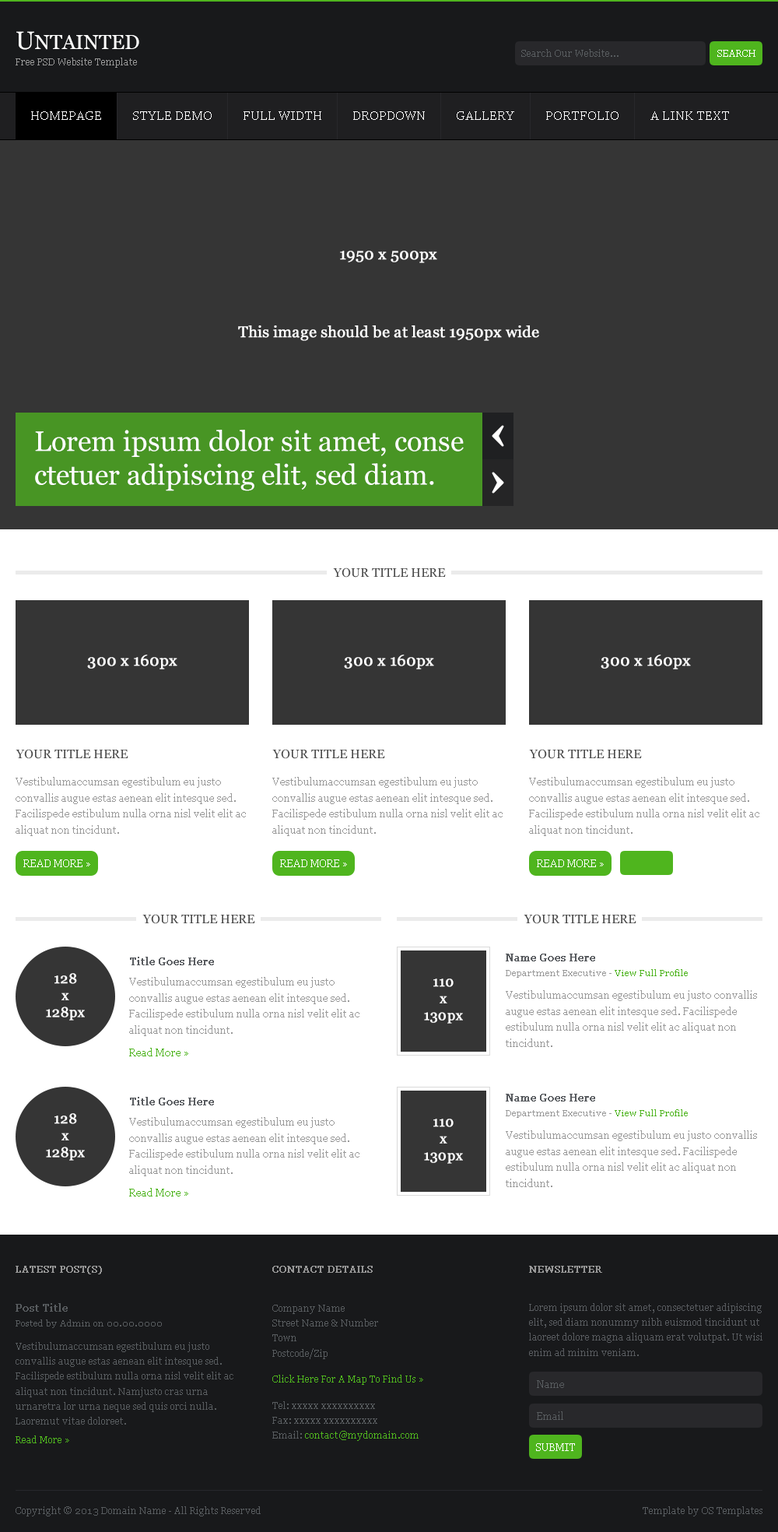
<style>
.page{position:relative;width:778px;height:1532px;background:#ffffff}
.page>*{position:absolute;margin:0}
.t1{font:20.2px "Georgia";color:#ffffff}
.t2{font:24.9px "Georgia";color:#ffffff}
.t3{font:9.3px "Georgia";color:#585c5f}
.t4{font:9.3px "Georgia";color:#ffffff}
.t5{font:9.3px "Georgia";color:#999999}
.t6{font:12.5px "Georgia";color:#ffffff}
.t7{font:15.6px "Georgia";color:#ffffff;font-weight:bold}
.t8{font:28px/33.6px "Georgia";color:#ffffff}
.t9{font:12.5px "Georgia";color:#4a4a4a}
.t10{font:10.1px/16.2px "Georgia";color:#999999}
.t11{font:10.1px "Georgia";color:#ffffff}
.t12{font:10.1px "Georgia";color:#585b5f;font-weight:bold}
.t13{font:14px/16.8px "Georgia";color:#ffffff;font-weight:bold}
.t14{font:8.6px "Georgia";color:#999999}
.t15{font:8.6px "Georgia";color:#4eb41e}
.t16{font:10.1px "Georgia";color:#4eb41e}
.t17{font:9.3px "Georgia";color:#979797;font-weight:bold}
.t18{font:10.1px "Georgia";color:#585c5f;font-weight:bold}
.t19{font:9.3px/14.9px "Georgia";color:#585c5f}
.t20{font:9.3px/11.2px "Georgia";color:#4fb51e}
.t21{font:9.3px/14.9px "Georgia";color:#4fb51e}
.t22{font:9.3px/14.9px "Georgia";color:#585b5f}
.t23{font:8.6px "Georgia";color:#585c5f}
.t24{font:10.1px "Georgia";color:#585c5f}
.t25{font:9.3px "Georgia";color:#4fb51e}
</style>
<div class="page">
<p class="t1" style="left:16px;top:31px;width:123px;height:19px"><span class="t2">U</span>NTAINTED</p>
<p class="t3" style="left:522px;top:49px;width:97px;height:8px">Search Our Website...</p>
<p class="t4" style="left:718px;top:50px;width:38px;height:7px">SEARCH</p>
<p class="t5" style="left:16px;top:58px;width:121px;height:10px">Free PSD Website Template</p>
<p class="t6" style="left:31px;top:111px;width:70px;height:9px">HOMEPAGE</p>
<p class="t6" style="left:133px;top:111px;width:79px;height:9px">STYLE DEMO</p>
<p class="t6" style="left:244px;top:111px;width:77px;height:9px">FULL WIDTH</p>
<p class="t6" style="left:353px;top:111px;width:72px;height:9px">DROPDOWN</p>
<p class="t6" style="left:457px;top:111px;width:58px;height:9px">GALLERY</p>
<p class="t6" style="left:546px;top:111px;width:73px;height:9px">PORTFOLIO</p>
<p class="t6" style="left:651px;top:111px;width:78px;height:9px">A LINK TEXT</p>
<p class="t7" style="left:340px;top:251px;width:97px;height:12px">1950 x 500px</p>
<p class="t7" style="left:238px;top:325px;width:301px;height:16px">This image should be at least 1950px wide</p>
<p class="t8" style="left:35px;top:430px;width:429px;height:61px">Lorem ipsum dolor sit amet, conse ctetuer adipiscing elit, sed diam.</p>
<p class="t9" style="left:333px;top:567px;width:113px;height:11px">YOUR TITLE HERE</p>
<p class="t7" style="left:87px;top:655px;width:90px;height:14px">300 x 160px</p>
<p class="t7" style="left:344px;top:655px;width:90px;height:14px">300 x 160px</p>
<p class="t7" style="left:601px;top:655px;width:90px;height:14px">300 x 160px</p>
<p class="t9" style="left:16px;top:749px;width:112px;height:10px">YOUR TITLE HERE</p>
<p class="t9" style="left:272px;top:749px;width:113px;height:10px">YOUR TITLE HERE</p>
<p class="t9" style="left:529px;top:749px;width:113px;height:10px">YOUR TITLE HERE</p>
<p class="t10" style="left:16px;top:777px;width:230px;height:59px">Vestibulumaccumsan egestibulum eu justo convallis augue estas aenean elit intesque sed. Facilispede estibulum nulla orna nisl velit elit ac aliquat non tincidunt.</p>
<p class="t10" style="left:272px;top:777px;width:231px;height:59px">Vestibulumaccumsan egestibulum eu justo convallis augue estas aenean elit intesque sed. Facilispede estibulum nulla orna nisl velit elit ac aliquat non tincidunt.</p>
<p class="t10" style="left:529px;top:777px;width:231px;height:59px">Vestibulumaccumsan egestibulum eu justo convallis augue estas aenean elit intesque sed. Facilispede estibulum nulla orna nisl velit elit ac aliquat non tincidunt.</p>
<p class="t11" style="left:23px;top:859px;width:67px;height:8px">READ MORE »</p>
<p class="t11" style="left:280px;top:859px;width:67px;height:8px">READ MORE »</p>
<p class="t11" style="left:537px;top:859px;width:67px;height:8px">READ MORE »</p>
<p class="t9" style="left:142px;top:914px;width:113px;height:10px">YOUR TITLE HERE</p>
<p class="t9" style="left:524px;top:914px;width:113px;height:10px">YOUR TITLE HERE</p>
<p class="t12" style="left:506px;top:954px;width:89px;height:7px">Name Goes Here</p>
<p class="t12" style="left:130px;top:957px;width:84px;height:8px">Title Goes Here</p>
<p class="t13" style="left:46px;top:973px;width:39px;height:47px;text-align:center">128<br>x<br>128px</p>
<p class="t10" style="left:129px;top:977px;width:231px;height:59px">Vestibulumaccumsan egestibulum eu justo convallis augue estas aenean elit intesque sed. Facilispede estibulum nulla orna nisl velit elit ac aliquat non tincidunt.</p>
<p class="t14" style="left:506px;top:969px;width:182px;height:9px">Department Executive - <span class="t15">View Full Profile</span></p>
<p class="t13" style="left:424px;top:978px;width:39px;height:46px;text-align:center">110<br>x<br>130px</p>
<p class="t10" style="left:506px;top:990px;width:251px;height:57px">Vestibulumaccumsan egestibulum eu justo convallis augue estas aenean elit intesque sed. Facilispede estibulum nulla orna nisl velit elit ac aliquat non tincidunt.</p>
<p class="t16" style="left:129px;top:1048px;width:59px;height:8px">Read More »</p>
<p class="t12" style="left:130px;top:1097px;width:84px;height:8px">Title Goes Here</p>
<p class="t12" style="left:506px;top:1094px;width:89px;height:7px">Name Goes Here</p>
<p class="t14" style="left:506px;top:1109px;width:182px;height:9px">Department Executive - <span class="t15">View Full Profile</span></p>
<p class="t13" style="left:46px;top:1113px;width:39px;height:48px;text-align:center">128<br>x<br>128px</p>
<p class="t10" style="left:129px;top:1117px;width:231px;height:59px">Vestibulumaccumsan egestibulum eu justo convallis augue estas aenean elit intesque sed. Facilispede estibulum nulla orna nisl velit elit ac aliquat non tincidunt.</p>
<p class="t13" style="left:424px;top:1119px;width:39px;height:45px;text-align:center">110<br>x<br>130px</p>
<p class="t10" style="left:506px;top:1130px;width:251px;height:57px">Vestibulumaccumsan egestibulum eu justo convallis augue estas aenean elit intesque sed. Facilispede estibulum nulla orna nisl velit elit ac aliquat non tincidunt.</p>
<p class="t16" style="left:129px;top:1188px;width:59px;height:8px">Read More »</p>
<p class="t17" style="left:16px;top:1266px;width:86px;height:8px">LATEST POST(S)</p>
<p class="t17" style="left:272px;top:1266px;width:101px;height:7px">CONTACT DETAILS</p>
<p class="t17" style="left:529px;top:1266px;width:73px;height:7px">NEWSLETTER</p>
<p class="t18" style="left:16px;top:1303px;width:52px;height:9px">Post Title</p>
<p class="t19" style="left:272px;top:1305px;width:151px;height:136px">Company Name<br>Street Name &amp; Number<br>Town<br>Postcode/Zip<br><br><span class="t20">Click Here For A Map To Find Us »<br><br></span>Tel: xxxxx xxxxxxxxxx<br>Fax: xxxxx xxxxxxxxxx<br>Email: <span class="t21">contact@mydomain.com</span></p>
<p class="t22" style="left:529px;top:1303px;width:234px;height:53px">Lorem ipsum dolor sit amet, consectetuer adipiscing elit, sed diam nonummy nibh euismod tincidunt ut laoreet dolore magna aliquam erat volutpat. Ut wisi enim ad minim veniam.</p>
<p class="t23" style="left:16px;top:1319px;width:146px;height:9px">Posted by Admin on 00.00.0000</p>
<p class="t19" style="left:16px;top:1342px;width:218px;height:82px">Vestibulumaccumsan egestibulum eu justo convallis augue estas aenean elit intesque sed. Facilispede estibulum nulla orna nisl velit elit ac aliquat non tincidunt. Namjusto cras urna urnaretra lor urna neque sed quis orci nulla. Laoremut vitae doloreet.</p>
<p class="t24" style="left:537px;top:1380px;width:27px;height:8px">Name</p>
<p class="t24" style="left:537px;top:1411px;width:27px;height:9px">Email</p>
<p class="t25" style="left:16px;top:1435px;width:53px;height:8px">Read More »</p>
<p class="t11" style="left:536px;top:1443px;width:39px;height:8px">SUBMIT</p>
<p class="t3" style="left:16px;top:1506px;width:245px;height:10px">Copyright © 2013 Domain Name - All Rights Reserved</p>
<p class="t3" style="left:643px;top:1506px;width:120px;height:10px">Template by OS Templates</p>
</div>
